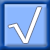
<style>
.page{position:relative;width:50px;height:50px;background:#8bb7ff}
.page>*{position:absolute;margin:0}
.t1{font:38.8px "MyriadPro-Regular";color:#ffffff;scale:1.56 1}
</style>
<div class="page">
<p class="t1" style="left:8px;top:7px;width:34px;height:36px">√</p>
</div>
